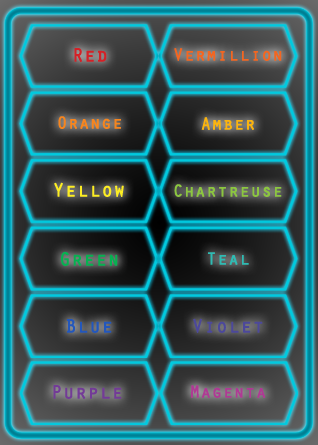
<style>
.page{position:relative;width:318px;height:445px}
.page>*{position:absolute;margin:0}
.t1{font:19.4px "OratorStd";color:#d52127;font-weight:bold}
.t2{font:17.6px "OratorStd";color:#f36621;font-weight:bold}
.t3{font:17.6px "OratorStd";color:#f6851e;font-weight:bold}
.t4{font:17.6px "OratorStd";color:#fbb40f;font-weight:bold}
.t5{font:19.4px "OratorStd";color:#fced23;font-weight:bold}
.t6{font:17.6px "OratorStd";color:#8cc640;font-weight:bold}
.t7{font:19.4px "OratorStd";color:#07b151;font-weight:bold}
.t8{font:17.6px "OratorStd";color:#2fbbb3;font-weight:bold}
.t9{font:19.4px "OratorStd";color:#4c489b;font-weight:bold}
.t10{font:19.4px "OratorStd";color:#2357bc;font-weight:bold}
.t11{font:19.4px "OratorStd";color:#733b97;font-weight:bold}
.t12{font:17.6px "OratorStd";color:#af3a94;font-weight:bold}
</style>
<div class="page">
<p class="t1" style="left:74px;top:48px;width:33px;height:14px">Red</p>
<p class="t2" style="left:174px;top:48px;width:108px;height:13px">Vermillion</p>
<p class="t3" style="left:58px;top:116px;width:63px;height:13px">Orange</p>
<p class="t4" style="left:201px;top:117px;width:53px;height:13px">Amber</p>
<p class="t5" style="left:54px;top:182px;width:70px;height:15px">Yellow</p>
<p class="t6" style="left:174px;top:184px;width:108px;height:13px">Chartreuse</p>
<p class="t7" style="left:61px;top:251px;width:57px;height:15px">Green</p>
<p class="t8" style="left:208px;top:252px;width:41px;height:13px">Teal</p>
<p class="t9" style="left:193px;top:318px;width:70px;height:15px">Violet</p>
<p class="t10" style="left:67px;top:319px;width:45px;height:14px">Blue</p>
<p class="t11" style="left:53px;top:385px;width:69px;height:14px">Purple</p>
<p class="t12" style="left:191px;top:385px;width:75px;height:13px">Magenta</p>
</div>
